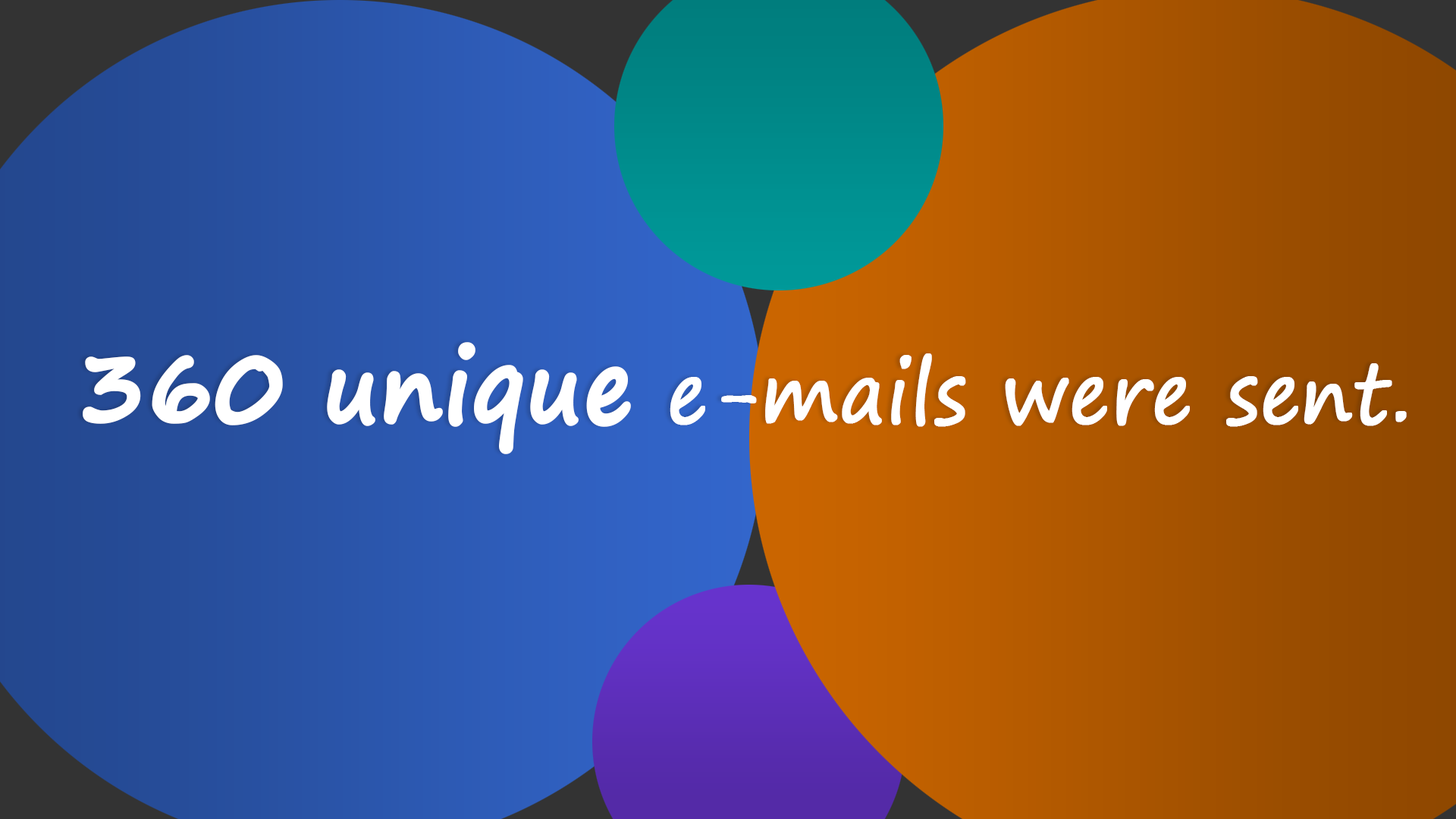
<style>
.page{position:relative;width:1456px;height:819px}
.page>*{position:absolute;margin:0}
.t1{font:83.4px "SegoePrint";color:#ffffff;font-weight:bold;scale:0.91 1}
.t2{font:100.1px "SegoePrint-Bold";color:#ffffff;font-weight:bold;scale:0.91 1}
</style>
<div class="page">
<p class="t1" style="left:83px;top:342px;width:1324px;height:112px"><span class="t2">360 unique</span> e-mails were sent.</p>
</div>
